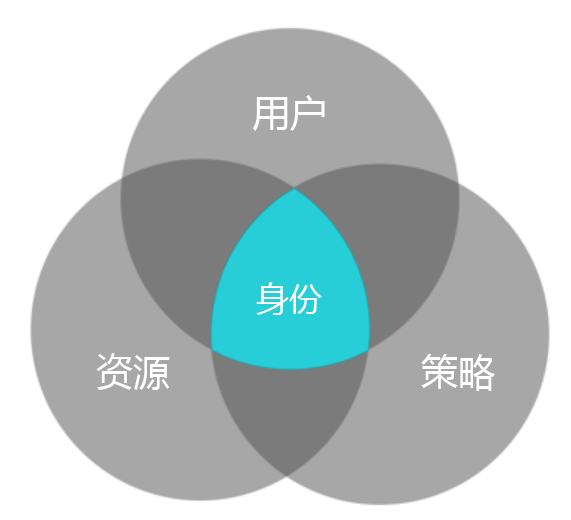
<style>
.page{position:relative;width:571px;height:520px;background:#ffffff}
.page>*{position:absolute;margin:0}
.t1{font:38px "MicrosoftYaHei";color:#ffffff}
.t2{font:34.2px "MicrosoftYaHei";color:#ffffff;scale:0.96 1}
.t3{font:37.4px "MicrosoftYaHei";color:#ffffff}
</style>
<div class="page">
<p class="t1" style="left:252px;top:95px;width:73px;height:36px">用户</p>
<p class="t2" style="left:256px;top:282px;width:66px;height:33px">身份</p>
<p class="t3" style="left:96px;top:353px;width:74px;height:37px">资源</p>
<p class="t3" style="left:421px;top:354px;width:74px;height:37px">策略</p>
</div>
